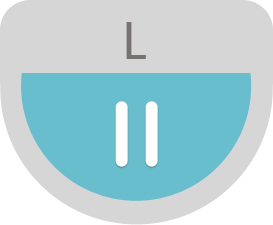
<style>
.page{position:relative;width:273px;height:225px;background:#d6d6d6}
.page>*{position:absolute;margin:0}
.t1{font:48px "MicrosoftYaHei";color:#767271}
</style>
<div class="page">
<p class="t1" style="left:126px;top:22px;width:20px;height:37px">L</p>
</div>
